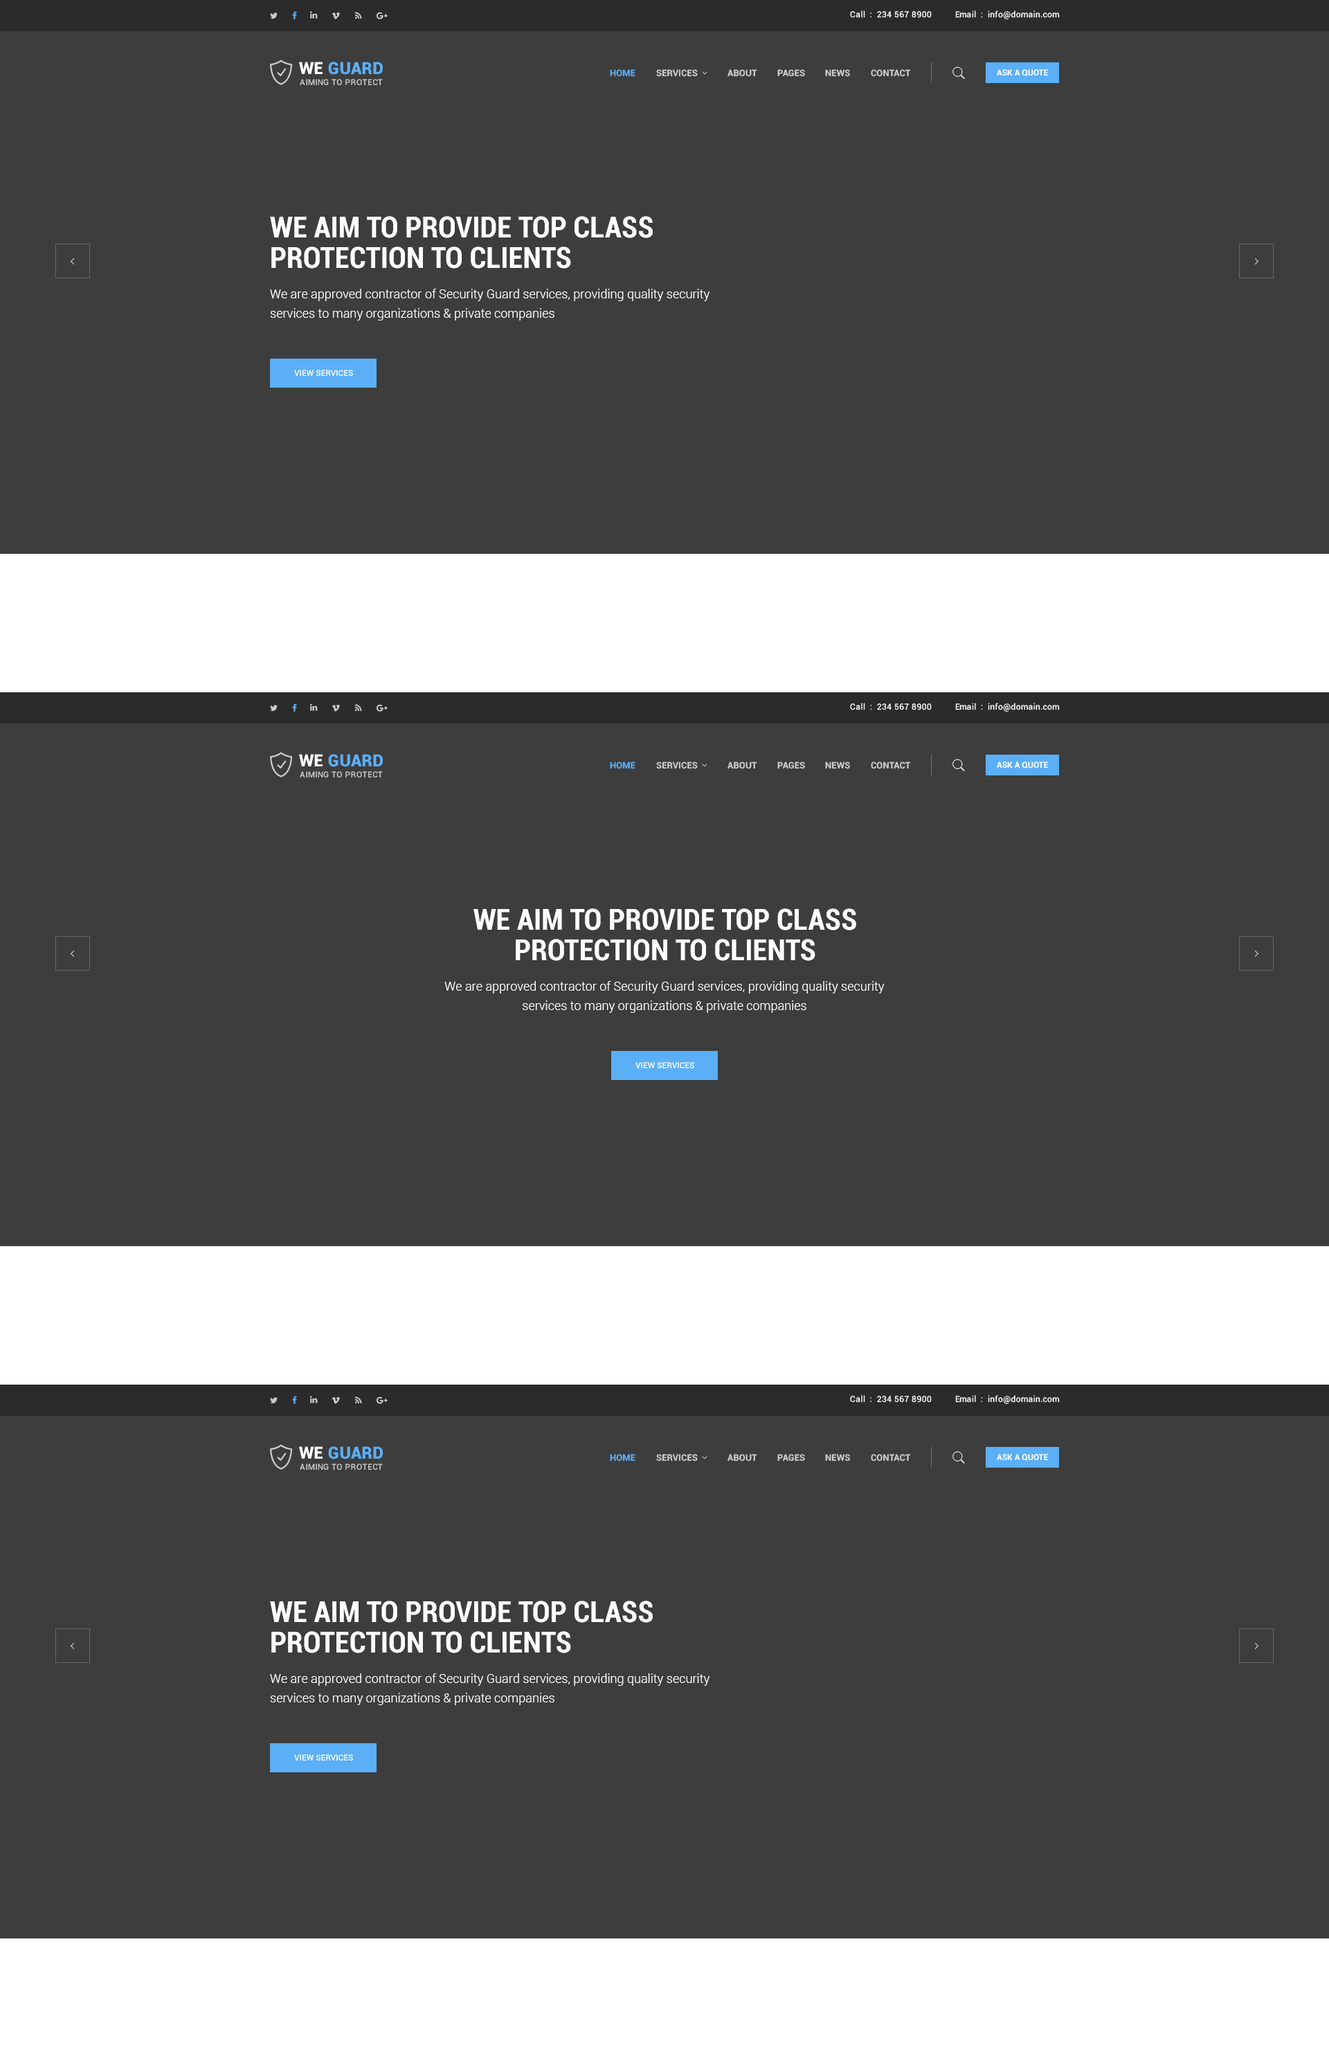
<style>
.page{position:relative;width:1329px;height:2070px;background:#3d3d3d}
.page>*{position:absolute;margin:0}
.t1{font:8.3px "Roboto-Regular";letter-spacing:0.025em;color:#ffffff}
.t2{font:16.6px "Roboto-Black";letter-spacing:0.025em;color:#5aaff7;text-transform:uppercase}
.t3{font:16.6px "Roboto-Black";letter-spacing:0.025em;color:#ffffff;text-transform:uppercase}
.t4{font:9px "Roboto-Bold";letter-spacing:0.01em;color:#5aaff7;text-transform:uppercase}
.t5{font:9px "Roboto-Bold";letter-spacing:0.01em;color:#cccccc;text-transform:uppercase}
.t6{font:8.3px "Roboto-Bold";color:#ffffff;text-transform:uppercase}
.t7{font:8.3px "Roboto-Medium";letter-spacing:0.035em;color:#cccccc;text-transform:uppercase}
.t8{font:30.5px/30.5px "Roboto-BoldCondensed";color:#ffffff;text-transform:uppercase}
.t9{font:12.5px/19.4px "Roboto-Light";color:#ffffff}
.t10{font:8.3px "Roboto-Medium";color:#ffffff;text-transform:uppercase}
</style>
<div class="page">
<p class="t1" style="left:850px;top:10px;width:82px;height:8px">Call  :  234 567 8900</p>
<p class="t1" style="left:955px;top:10px;width:105px;height:9px">Email  :  info@domain.com</p>
<p class="t2" style="left:299px;top:62px;width:84px;height:13px"><span class="t3">we </span>Guard</p>
<p class="t4" style="left:610px;top:69px;width:26px;height:8px">Home</p>
<p class="t5" style="left:656px;top:69px;width:42px;height:8px">Services</p>
<p class="t5" style="left:728px;top:69px;width:29px;height:8px">About</p>
<p class="t5" style="left:777px;top:69px;width:28px;height:8px">pages</p>
<p class="t5" style="left:825px;top:69px;width:25px;height:8px">news</p>
<p class="t5" style="left:871px;top:69px;width:40px;height:8px">Contact</p>
<p class="t6" style="left:997px;top:69px;width:51px;height:7px">ask a quote</p>
<p class="t7" style="left:300px;top:79px;width:83px;height:6px">aiming to protect</p>
<p class="t8" style="left:270px;top:216px;width:383px;height:53px">we aim to provide top class<br>protection to clients</p>
<p class="t9" style="left:270px;top:289px;width:440px;height:32px">We are approved contractor of Security Guard services, providing quality security<br>services to many organizations &amp; private companies</p>
<p class="t10" style="left:294px;top:370px;width:59px;height:6px">view services</p>
<p class="t1" style="left:850px;top:703px;width:82px;height:7px">Call  :  234 567 8900</p>
<p class="t1" style="left:955px;top:703px;width:105px;height:9px">Email  :  info@domain.com</p>
<p class="t2" style="left:299px;top:754px;width:84px;height:13px"><span class="t3">we </span>Guard</p>
<p class="t4" style="left:610px;top:762px;width:26px;height:7px">Home</p>
<p class="t5" style="left:656px;top:762px;width:42px;height:7px">Services</p>
<p class="t5" style="left:728px;top:762px;width:29px;height:7px">About</p>
<p class="t5" style="left:777px;top:762px;width:28px;height:7px">pages</p>
<p class="t5" style="left:825px;top:762px;width:25px;height:7px">news</p>
<p class="t5" style="left:871px;top:762px;width:40px;height:7px">Contact</p>
<p class="t6" style="left:997px;top:762px;width:51px;height:6px">ask a quote</p>
<p class="t7" style="left:300px;top:771px;width:83px;height:6px">aiming to protect</p>
<p class="t8" style="left:474px;top:908px;width:382px;height:53px;text-align:center">we aim to provide top class<br>protection to clients</p>
<p class="t9" style="left:444px;top:981px;width:441px;height:32px;text-align:center">We are approved contractor of Security Guard services, providing quality security<br>services to many organizations &amp; private companies</p>
<p class="t10" style="left:636px;top:1062px;width:58px;height:6px">view services</p>
<p class="t1" style="left:850px;top:1395px;width:82px;height:8px">Call  :  234 567 8900</p>
<p class="t1" style="left:955px;top:1395px;width:105px;height:9px">Email  :  info@domain.com</p>
<p class="t2" style="left:299px;top:1446px;width:84px;height:13px"><span class="t3">we </span>Guard</p>
<p class="t4" style="left:610px;top:1454px;width:26px;height:7px">Home</p>
<p class="t5" style="left:656px;top:1454px;width:42px;height:7px">Services</p>
<p class="t5" style="left:728px;top:1454px;width:29px;height:7px">About</p>
<p class="t5" style="left:777px;top:1454px;width:28px;height:7px">pages</p>
<p class="t5" style="left:825px;top:1454px;width:25px;height:7px">news</p>
<p class="t5" style="left:871px;top:1454px;width:40px;height:7px">Contact</p>
<p class="t6" style="left:997px;top:1454px;width:51px;height:7px">ask a quote</p>
<p class="t7" style="left:300px;top:1464px;width:83px;height:6px">aiming to protect</p>
<p class="t8" style="left:270px;top:1601px;width:383px;height:52px">we aim to provide top class<br>protection to clients</p>
<p class="t9" style="left:270px;top:1673px;width:440px;height:32px">We are approved contractor of Security Guard services, providing quality security<br>services to many organizations &amp; private companies</p>
<p class="t10" style="left:294px;top:1754px;width:59px;height:7px">view services</p>
</div>
